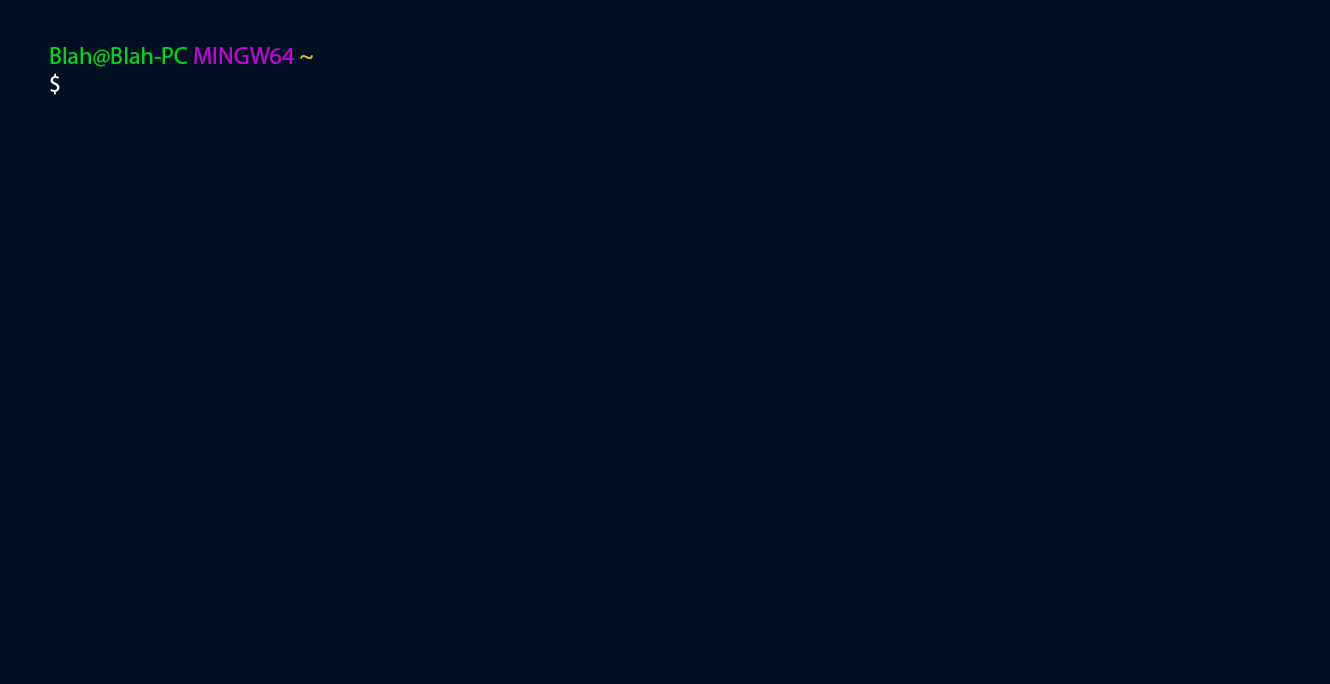
<style>
.page{position:relative;width:1330px;height:684px;background:#001022}
.page>*{position:absolute;margin:0}
.t1{font:24px "MyriadPro-Regular";color:#04d31c}
.t2{font:24px "MyriadPro-Regular";color:#c206d8}
.t3{font:24px "MyriadPro-Regular";color:#edc900}
.t4{font:24px "MyriadPro-Regular";color:#ffffff}
</style>
<div class="page">
<p class="t1" style="left:50px;top:47px;width:263px;height:48px">Blah@Blah-PC <span class="t2">MINGW64 </span><span class="t3">~<br></span><span class="t4">$</span></p>
</div>
